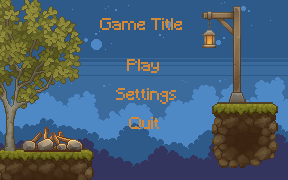
<style>
.page{position:relative;width:288px;height:180px;background:#2e5a89}
.page>*{position:absolute;margin:0}
.t1{font:16px "Minecraft";color:#d28a39}
</style>
<div class="page">
<p class="t1" style="left:100px;top:18px;width:82px;height:12px">Game Title</p>
<p class="t1" style="left:127px;top:59px;width:32px;height:14px">Play</p>
<p class="t1" style="left:116px;top:88px;width:60px;height:16px">Settings</p>
<p class="t1" style="left:129px;top:117px;width:30px;height:12px">Quit</p>
</div>
